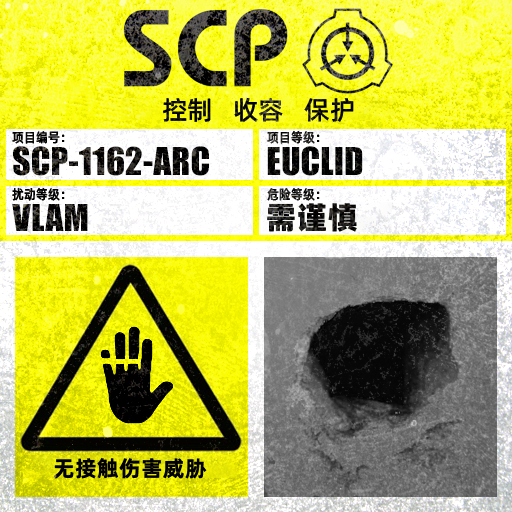
<style>
.page{position:relative;width:512px;height:512px}
.page>*{position:absolute;margin:0}
.t1{font:26px "AlibabaPuHuiTiM";color:#000000}
.t2{font:13.3px "AlibabaPuHuiTiM";letter-spacing:0.02em;color:#000000;scale:0.9 1}
.t3{font:13.3px "AlibabaPuHuiTiM";letter-spacing:0.02em;scale:0.9 1}
.t4{font:30.3px "AlibabaPuHuiTiH";letter-spacing:0.02em}
.t5{font:22px "AlibabaPuHuiTiB";letter-spacing:0.02em;color:#000000}
</style>
<div class="page">
<p class="t1" style="left:163px;top:97px;width:191px;height:26px">控制   收容   保护</p>
<p class="t2" style="left:12px;top:131px;width:53px;height:13px">项目编号：</p>
<p class="t3" style="left:267px;top:131px;width:53px;height:13px">项目等级：</p>
<p class="t2" style="left:12px;top:188px;width:53px;height:13px">扰动等级：</p>
<p class="t3" style="left:267px;top:188px;width:53px;height:13px">危险等级：</p>
<p class="t4" style="left:267px;top:203px;width:90px;height:29px">需谨慎</p>
<p class="t5" style="left:53px;top:458px;width:154px;height:21px">无接触伤害威胁</p>
</div>
